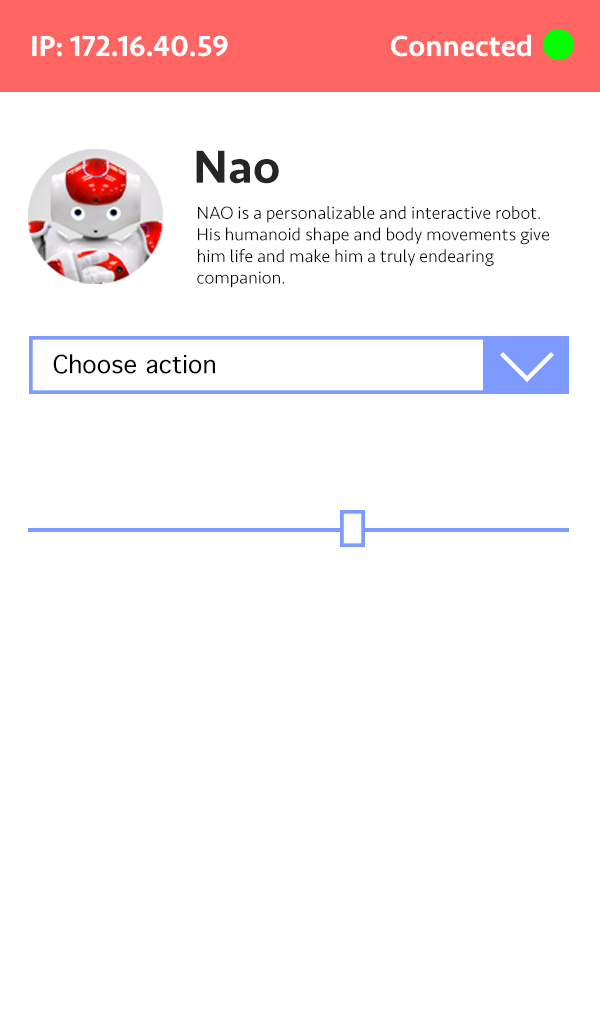
<style>
.page{position:relative;width:600px;height:1024px;background:#ffffff}
.page>*{position:absolute;margin:0}
.t1{font:30px "Seravek-Medium";color:#ffffff}
.t2{font:48px "Seravek-Medium";color:#252525}
.t3{font:18px "Seravek-Light";color:#000000}
.t4{font:24px "Geneva";color:#000000}
</style>
<div class="page">
<p class="t1" style="left:32px;top:34px;width:499px;height:23px">IP: 172.16.40.59     Connected</p>
<p class="t2" style="left:196px;top:150px;width:83px;height:34px">Nao</p>
<p class="t3" style="left:197px;top:206px;width:352px;height:82px">NAO is a personalizable and interactive robot.<br>His humanoid shape and body movements give him life and make him a truly endearing <br>companion.</p>
<p class="t4" style="left:53px;top:354px;width:162px;height:20px">Choose action</p>
</div>
